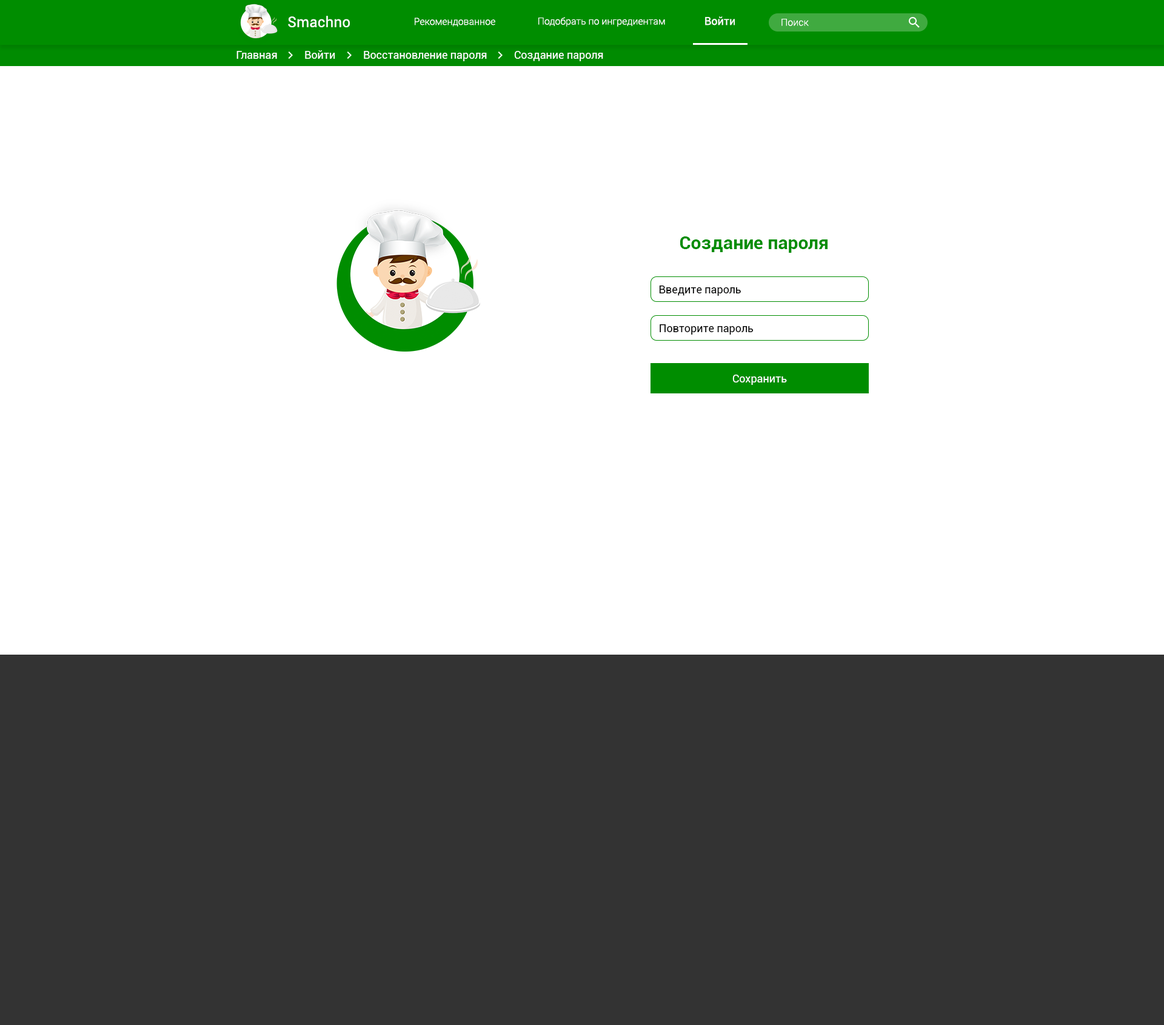
<style>
.page{position:relative;width:1164px;height:1025px;background:#ffffff}
.page>*{position:absolute;margin:0}
.t1{font:14.5px "Roboto-Regular";letter-spacing:0.01em;color:#ffffff}
.t2{font:9.7px "Roboto-Light";color:#ffffff}
.t3{font:10.9px "Roboto-Regular";color:#ffffff}
.t4{font:18.2px "Roboto-Bold";color:#008d00}
.t5{font:10.9px "Roboto-Regular";color:#000000}
</style>
<div class="page">
<p class="t1" style="left:288px;top:16px;width:62px;height:11px">Smachno</p>
<p class="t2" style="left:415px;top:18px;width:80px;height:9px">Рекомендованное</p>
<p class="t2" style="left:538px;top:17px;width:127px;height:10px">Подобрать по ингредиентам</p>
<p class="t3" style="left:705px;top:16px;width:30px;height:9px">Войти</p>
<p class="t2" style="left:781px;top:19px;width:27px;height:7px">Поиск</p>
<p class="t3" style="left:236px;top:51px;width:41px;height:8px">Главная</p>
<p class="t3" style="left:305px;top:50px;width:30px;height:9px">Войти</p>
<p class="t3" style="left:364px;top:51px;width:123px;height:10px">Восстановление пароля</p>
<p class="t3" style="left:514px;top:51px;width:89px;height:10px">Создание пароля</p>
<p class="t4" style="left:680px;top:236px;width:147px;height:17px">Создание пароля</p>
<p class="t5" style="left:659px;top:285px;width:82px;height:11px">Введите пароль</p>
<p class="t5" style="left:659px;top:324px;width:94px;height:11px">Повторите пароль</p>
<p class="t3" style="left:732px;top:375px;width:55px;height:10px">Сохранить</p>
</div>
